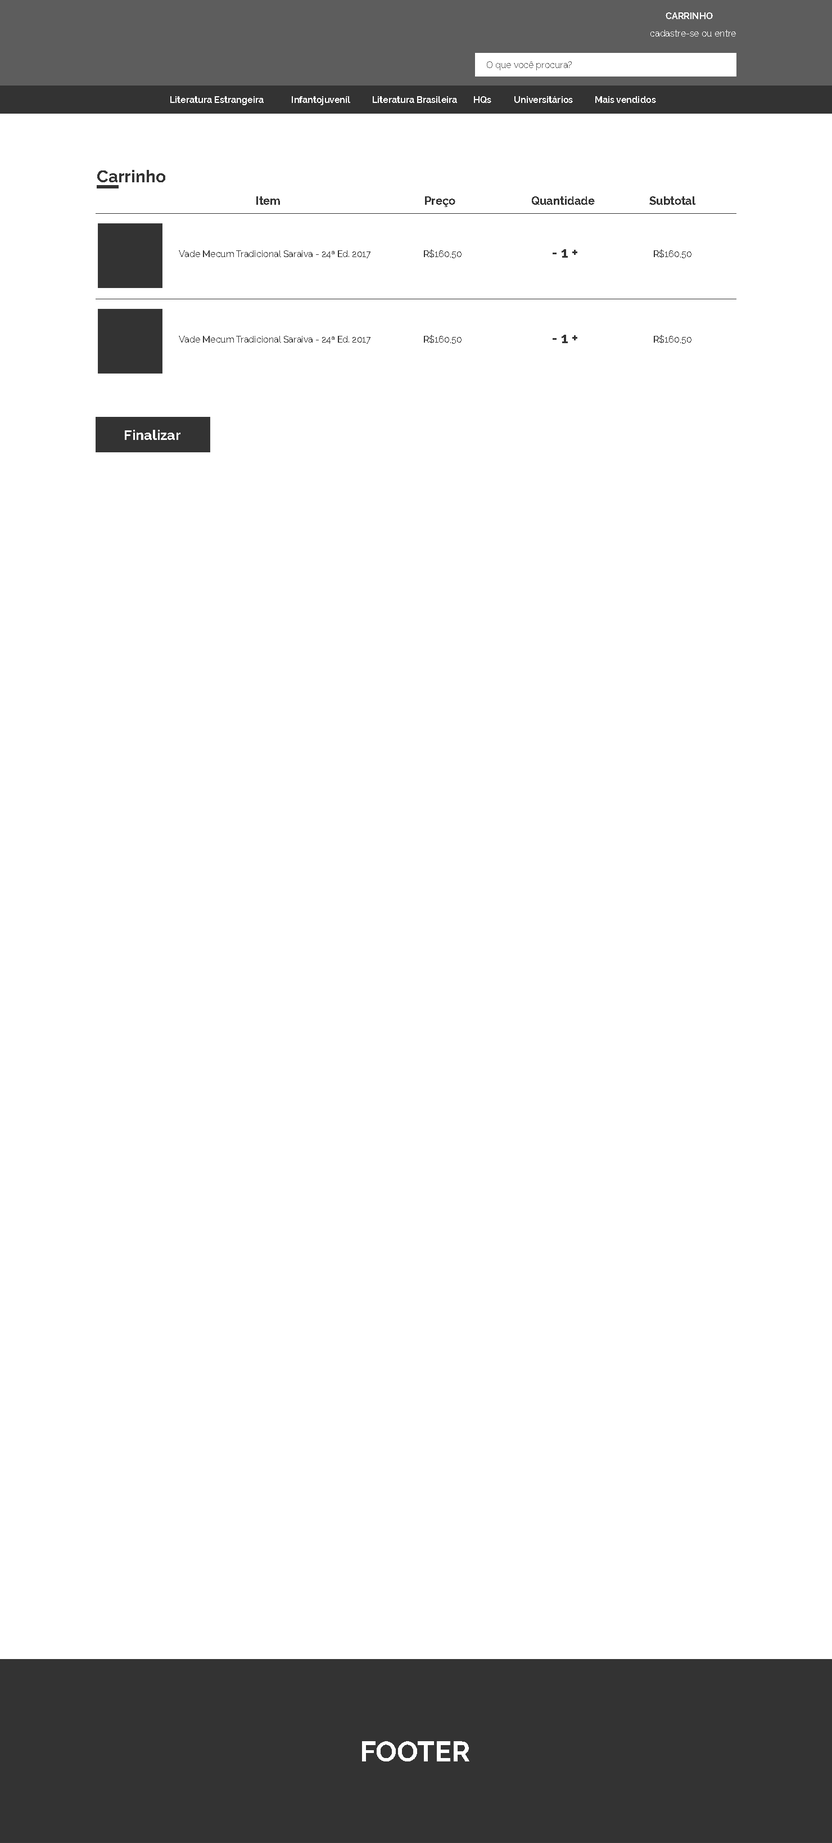
<style>
.page{position:relative;width:832px;height:1843px;background:#ffffff}
.page>*{position:absolute;margin:0}
.t1{font:9px "Raleway-Bold";color:#ffffff}
.t2{font:9px "Raleway-Regular";color:#ffffff}
.t3{font:9px "Raleway-Regular";color:#616161}
.t4{font:9px "Raleway-Bold";color:#fefefe}
.t5{font:16.9px "Raleway-Bold";color:#333333}
.t6{font:11.2px "Raleway-Bold";color:#333333}
.t7{font:9px "Raleway-Regular";color:#333333}
.t8{font:14.6px "Raleway-Bold";color:#333333}
.t9{font:14.1px "Raleway-Bold";color:#ffffff}
.t10{font:28.1px "Raleway-Bold";color:#ffffff}
</style>
<div class="page">
<p class="t1" style="left:666px;top:12px;width:47px;height:7px">CARRINHO</p>
<p class="t2" style="left:651px;top:30px;width:85px;height:7px">cadastre-se ou entre</p>
<p class="t3" style="left:487px;top:61px;width:85px;height:9px">O que você procura?</p>
<p class="t4" style="left:170px;top:96px;width:486px;height:9px">Literatura Estrangeira  Infantojuveníl  Literatura Brasileira HQs  Universitários  Mais vendidos</p>
<p class="t5" style="left:97px;top:170px;width:68px;height:12px">Carrinho</p>
<p class="t6" style="left:256px;top:196px;width:24px;height:9px">Item</p>
<p class="t6" style="left:425px;top:196px;width:31px;height:11px">Preço</p>
<p class="t6" style="left:532px;top:196px;width:63px;height:9px">Quantidade</p>
<p class="t6" style="left:650px;top:196px;width:46px;height:9px">Subtotal</p>
<p class="t7" style="left:179px;top:250px;width:192px;height:8px">Vade Mecum Tradicional Saraiva - 24ª Ed. 2017</p>
<p class="t7" style="left:424px;top:249px;width:38px;height:9px">R$160,50</p>
<p class="t8" style="left:553px;top:249px;width:25px;height:9px">- 1 +</p>
<p class="t7" style="left:654px;top:249px;width:38px;height:9px">R$160,50</p>
<p class="t7" style="left:179px;top:336px;width:192px;height:8px">Vade Mecum Tradicional Saraiva - 24ª Ed. 2017</p>
<p class="t7" style="left:424px;top:335px;width:38px;height:9px">R$160,50</p>
<p class="t8" style="left:553px;top:335px;width:25px;height:8px">- 1 +</p>
<p class="t7" style="left:654px;top:335px;width:38px;height:9px">R$160,50</p>
<p class="t9" style="left:125px;top:430px;width:56px;height:10px">Finalizar</p>
<p class="t10" style="left:362px;top:1741px;width:108px;height:20px">FOOTER</p>
</div>
